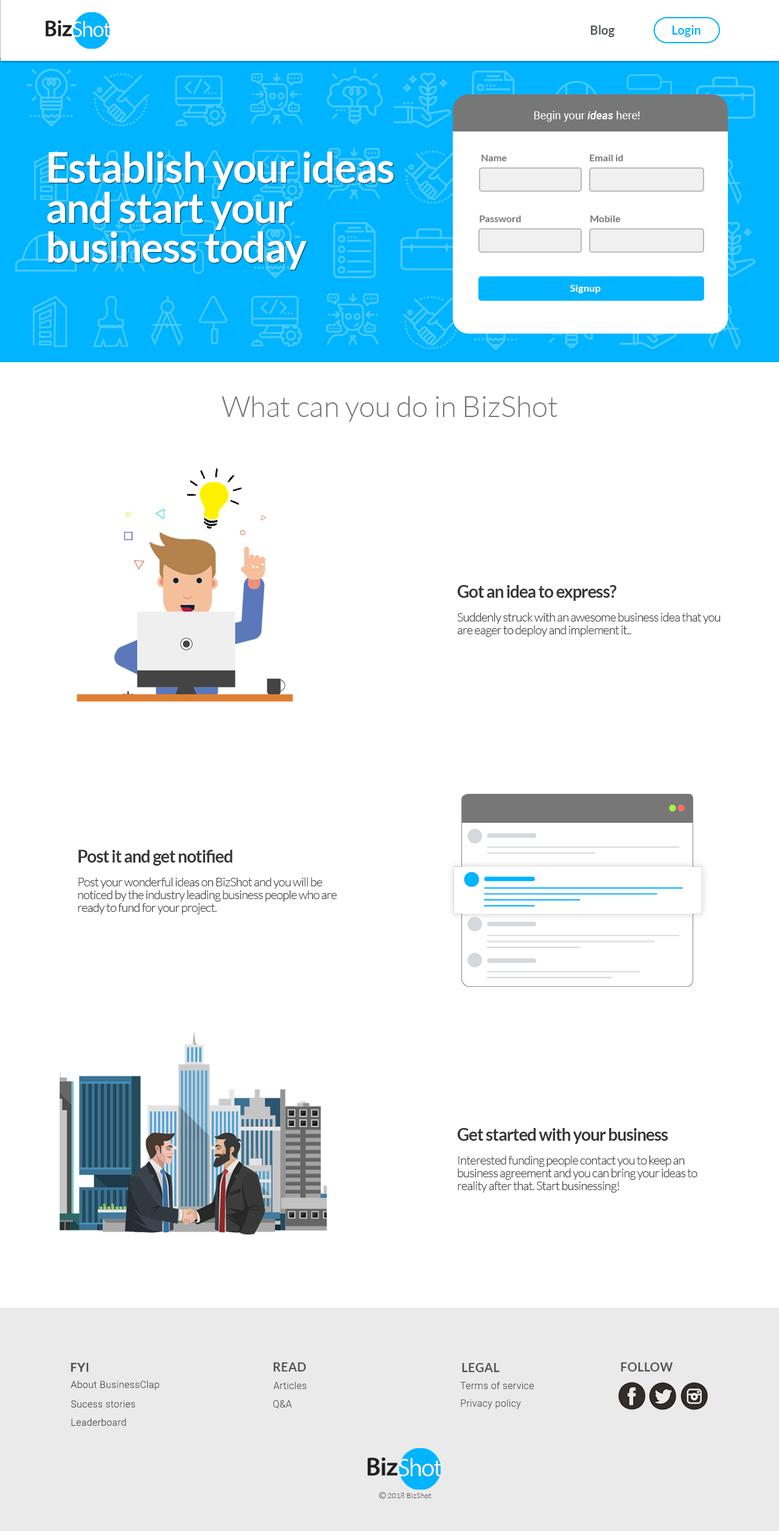
<style>
.page{position:relative;width:779px;height:1531px;background:#ffffff}
.page>*{position:absolute;margin:0}
.t1{font:12.2px "Lato-Bold";color:#4b5658}
.t2{font:12.2px "Lato-Bold";color:#00b4ff}
.t3{font:11px "Roboto-Regular";color:#ffffff}
.t4{font:11px "Roboto-MediumItalic";color:#ffffff}
.t5{font:41.4px/40.1px "Lato-Bold";letter-spacing:-0.02em;color:#ffffff}
.t6{font:9.7px "Lato-Bold";color:#777777}
.t7{font:9.7px "Lato-Bold";letter-spacing:0.02em;color:#ffffff}
.t8{font:29.2px "Lato-Light";color:#777777}
.t9{font:17px "Lato-Bold";letter-spacing:-0.04em;color:#363636}
.t10{font:12.2px/12.7px "Lato-Light";letter-spacing:-0.04em;color:#363636}
.t11{font:12.2px "Lato-Bold";letter-spacing:0.02em;color:#515151}
.t12{font:9.7px "Roboto-Light";letter-spacing:0.02em;color:#515151}
.t13{font:7.3px "Lato-Light";letter-spacing:0.02em;color:#515151}
</style>
<div class="page">
<p class="t1" style="left:591px;top:25px;width:24px;height:12px">Blog</p>
<p class="t2" style="left:673px;top:25px;width:28px;height:12px">Login</p>
<p class="t3" style="left:534px;top:111px;width:106px;height:11px">Begin your <span class="t4">ideas</span> here!</p>
<p class="t5" style="left:47px;top:152px;width:347px;height:118px">Establish your ideas and start your business today</p>
<p class="t6" style="left:481px;top:155px;width:26px;height:6px">Name</p>
<p class="t6" style="left:590px;top:155px;width:33px;height:6px">Email id</p>
<p class="t6" style="left:480px;top:215px;width:41px;height:7px">Password</p>
<p class="t6" style="left:590px;top:215px;width:31px;height:7px">Mobile</p>
<p class="t7" style="left:570px;top:285px;width:31px;height:8px">Signup</p>
<p class="t8" style="left:222px;top:396px;width:335px;height:26px">What can you do in BizShot</p>
<p class="t9" style="left:457px;top:585px;width:160px;height:16px">Got an idea to express?</p>
<p class="t10" style="left:457px;top:612px;width:264px;height:25px">Suddenly struck with an awesome business idea that you are eager to deploy and implement it..</p>
<p class="t9" style="left:79px;top:850px;width:153px;height:15px">Post it and get notified</p>
<p class="t10" style="left:78px;top:877px;width:259px;height:37px">Post your wonderful ideas on BizShot and you will be noticed by the industry leading business people who are ready to fund for your project.</p>
<p class="t9" style="left:457px;top:1128px;width:211px;height:16px">Get started with your business</p>
<p class="t10" style="left:458px;top:1155px;width:239px;height:37px">Interested funding people contact you to keep an business agreement and you can bring your ideas to reality after that. Start businessing!</p>
<p class="t11" style="left:71px;top:1362px;width:17px;height:10px">FYI</p>
<p class="t11" style="left:273px;top:1362px;width:33px;height:9px">READ</p>
<p class="t11" style="left:462px;top:1363px;width:38px;height:9px">LEGAL</p>
<p class="t11" style="left:621px;top:1362px;width:52px;height:9px">FOLLOW</p>
<p class="t12" style="left:71px;top:1380px;width:88px;height:10px">About BusinessClap</p>
<p class="t12" style="left:273px;top:1382px;width:34px;height:7px">Articles</p>
<p class="t12" style="left:460px;top:1382px;width:74px;height:7px">Terms of service</p>
<p class="t12" style="left:71px;top:1400px;width:64px;height:8px">Sucess stories</p>
<p class="t12" style="left:273px;top:1400px;width:19px;height:8px">Q&amp;A</p>
<p class="t12" style="left:461px;top:1399px;width:60px;height:9px">Privacy policy</p>
<p class="t12" style="left:71px;top:1418px;width:55px;height:8px">Leaderboard</p>
<p class="t13" style="left:388px;top:1492px;width:44px;height:6px">2018 BizShot</p>
</div>
